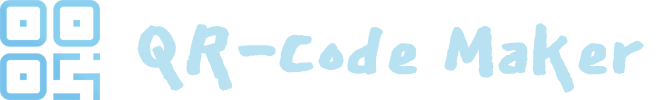
<style>
.page{position:relative;width:667px;height:100px;background:#ffffff}
.page>*{position:absolute;margin:0}
.t1{font:100.7px "EastSeaDokdo-Regular";letter-spacing:-0.005em;color:#b8e2f2;font-weight:bold}
</style>
<div class="page">
<p class="t1" style="left:137px;top:23px;width:507px;height:70px">QR-Code Maker</p>
</div>
